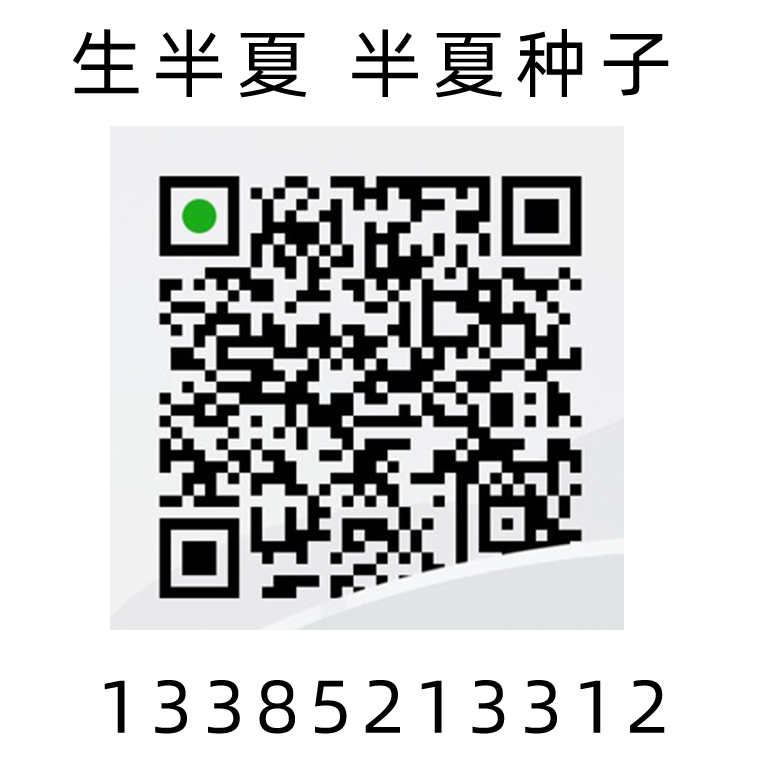
<style>
.page{position:relative;width:768px;height:767px;background:#ffffff}
.page>*{position:absolute;margin:0}
.t1{font:75px "AlibabaPuHuiTiR";letter-spacing:0.13em;color:#000000}
</style>
<div class="page">
<p class="t1" style="left:73px;top:29px;width:596px;height:69px">生半夏 半夏种子</p>
<p class="t1" style="left:104px;top:680px;width:561px;height:54px">13385213312</p>
</div>
